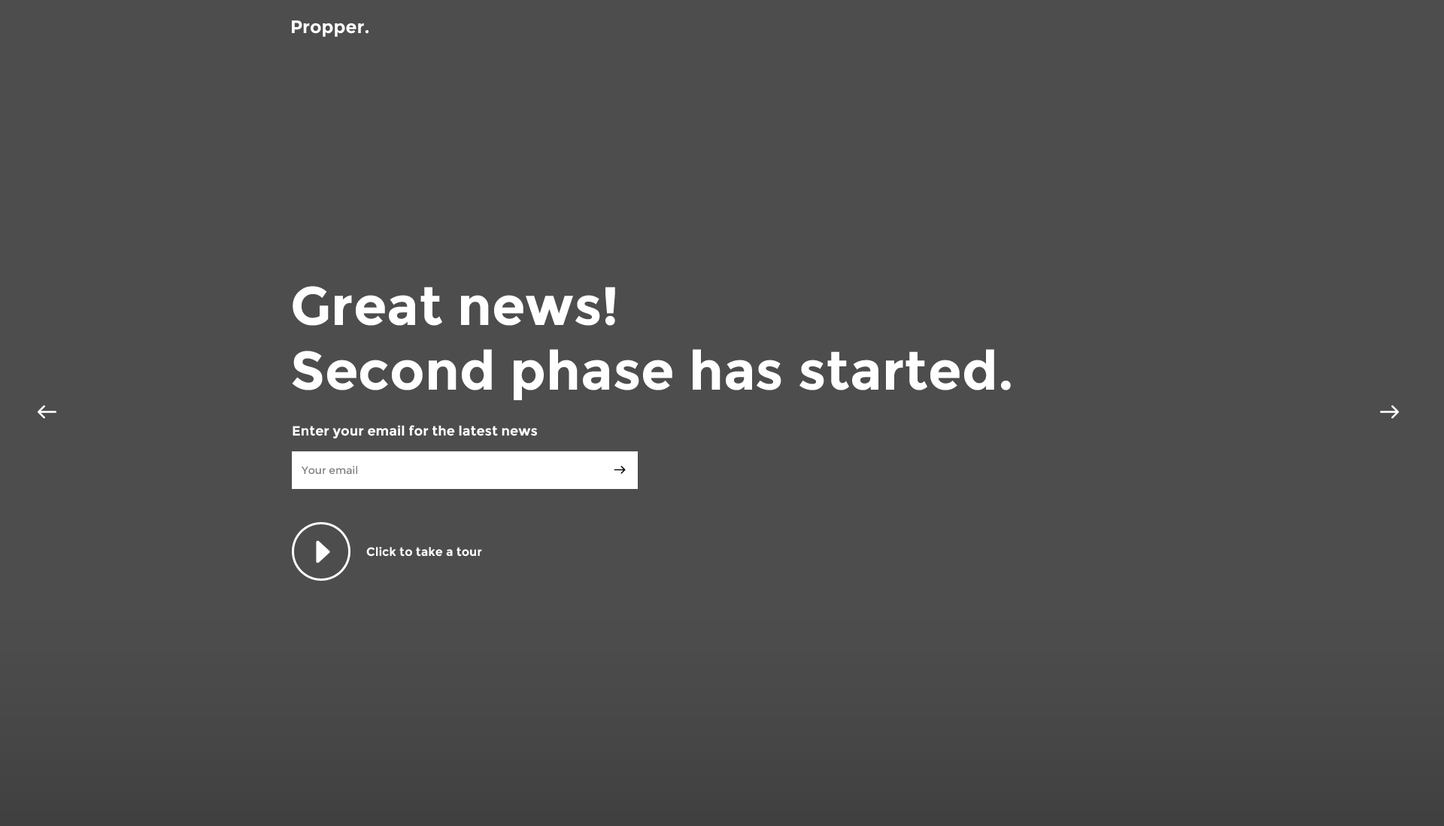
<style>
.page{position:relative;width:1444px;height:826px;background:#4d4d4d}
.page>*{position:absolute;margin:0}
.t1{font:18px "Montserrat-Bold";color:#ffffff}
.t2{font:54.1px "Montserrat-Bold";color:#ffffff}
.t3{font:13.5px "Montserrat-Bold";color:#ffffff}
.t4{font:10.5px "Montserrat-Regular";color:#7f7f7f}
.t5{font:12px "Montserrat-Bold";color:#ffffff}
</style>
<div class="page">
<p class="t1" style="left:292px;top:20px;width:77px;height:17px">Propper.</p>
<p class="t2" style="left:292px;top:286px;width:719px;height:114px">Great news!<br>Second phase has started.</p>
<p class="t3" style="left:293px;top:425px;width:244px;height:13px">Enter your email for the latest news</p>
<p class="t4" style="left:302px;top:466px;width:55px;height:8px">Your email</p>
<p class="t5" style="left:366px;top:547px;width:116px;height:10px">Click to take a tour</p>
</div>
